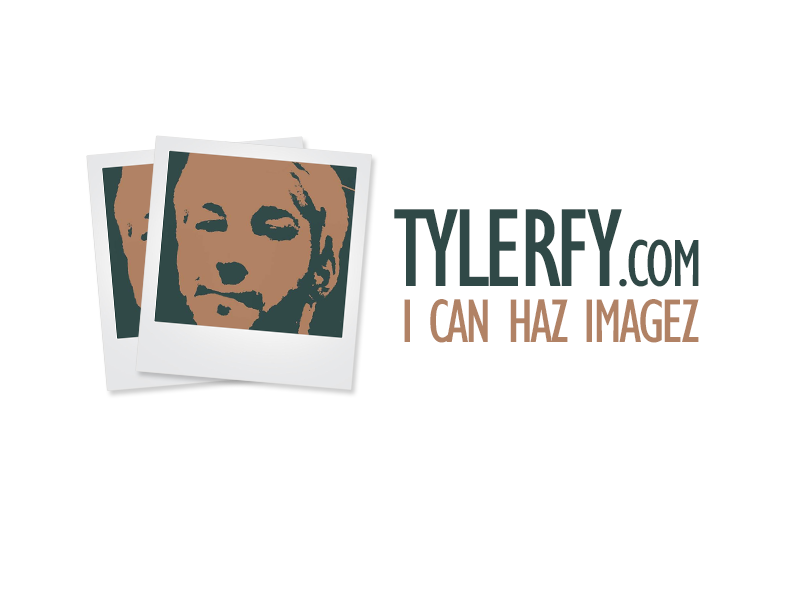
<style>
.page{position:relative;width:800px;height:600px;background:#ffffff}
.page>*{position:absolute;margin:0}
.t1{font:114.7px "GillSansMT-Condensed";letter-spacing:-0.05em;color:#304947;text-transform:uppercase}
.t2{font:68.8px "GillSansMT-Condensed";letter-spacing:-0.05em;color:#304947;text-transform:uppercase}
.t3{font:63.7px "GillSansMT-Condensed";letter-spacing:-0.05em;color:#b18265;text-transform:uppercase}
</style>
<div class="page">
<p class="t1" style="left:394px;top:209px;width:305px;height:78px">Tylerfy<span class="t2">.com</span></p>
<p class="t3" style="left:404px;top:299px;width:295px;height:44px">i can haZ imageZ</p>
</div>
